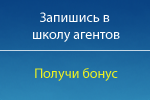
<style>
.page{position:relative;width:150px;height:100px}
.page>*{position:absolute;margin:0}
.t1{font:14px "MyriadPro-Regular";color:#ffffff}
.t2{font:14px "MyriadPro-Regular";color:#edf122}
</style>
<div class="page">
<p class="t1" style="left:33px;top:12px;width:87px;height:30px;text-align:center">Запишись в <br>школу агентов</p>
<p class="t2" style="left:35px;top:68px;width:83px;height:13px">Получи бонус</p>
</div>
